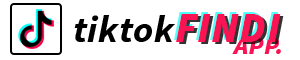
<style>
.page{position:relative;width:300px;height:60px;background:#ffffff}
.page>*{position:absolute;margin:0}
.t1{font:37.5px "SourceSansPro-BoldItalic";letter-spacing:0.025em;color:#000000}
.t2{font:41.7px "SourceSansPro-BlackItalic";letter-spacing:0.025em;color:#fa1454;text-transform:uppercase}
.t3{font:41.7px "SourceSansPro-BlackItalic";letter-spacing:0.025em;text-transform:uppercase}
.t4{font:25px "SourceSansPro-BlackItalic";letter-spacing:0.025em;color:#fa1454;text-transform:uppercase}
</style>
<div class="page">
<p class="t1" style="left:74px;top:15px;width:101px;height:27px">tiktok</p>
<p class="t2" style="left:176px;top:14px;width:105px;height:28px">findi</p>
<p class="t3" style="left:179px;top:16px;width:105px;height:28px">findi</p>
<p class="t4" style="left:232px;top:38px;width:49px;height:16px">app.</p>
</div>
